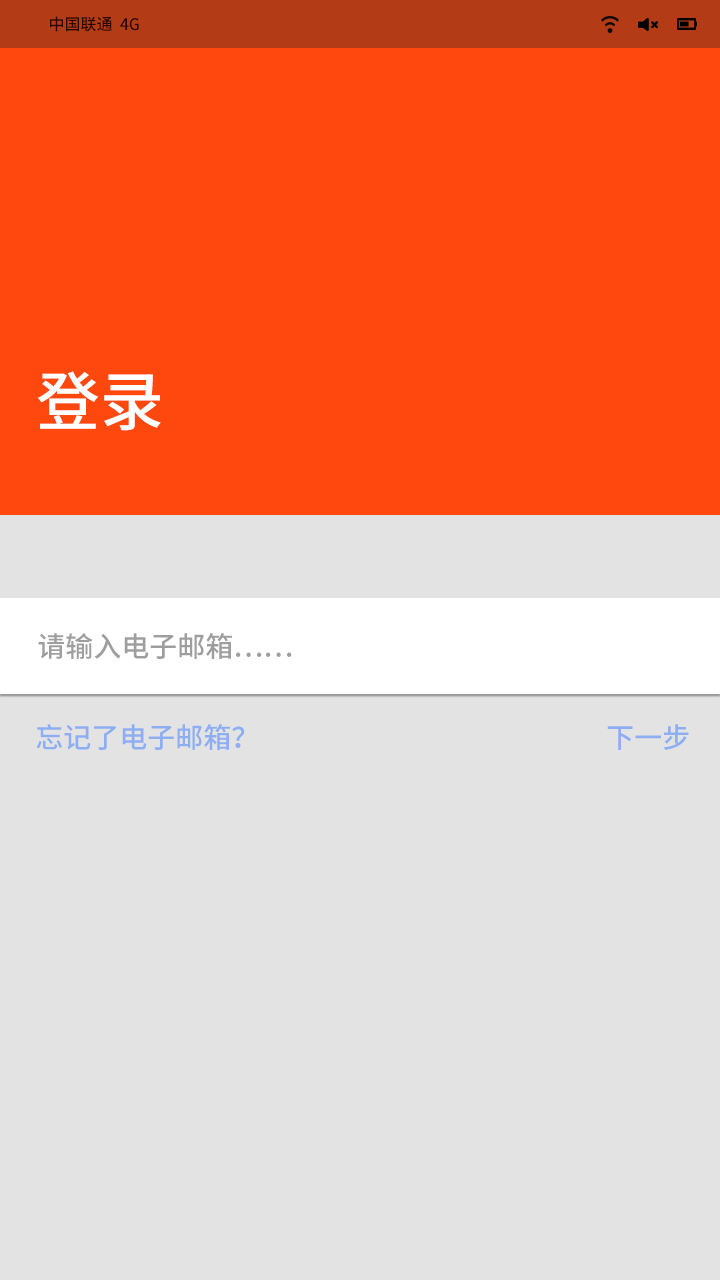
<style>
.page{position:relative;width:720px;height:1280px;background:#e4e3e3}
.page>*{position:absolute;margin:0}
.t1{font:16px "SourceHanSansCN-Medium";color:#2a0802}
.t2{font:64px "SourceHanSansCN-Medium";color:#ffffff}
.t3{font:28px "SourceHanSansCN-Medium";color:#9e9e9e}
.t4{font:28px "SourceHanSansCN-Medium";color:#8daef2}
</style>
<div class="page">
<p class="t1" style="left:50px;top:16px;width:89px;height:16px">中国联通  4G</p>
<p class="t2" style="left:37px;top:371px;width:124px;height:60px">登录</p>
<p class="t3" style="left:38px;top:633px;width:254px;height:26px">请输入电子邮箱……</p>
<p class="t4" style="left:36px;top:724px;width:209px;height:26px">忘记了电子邮箱？</p>
<p class="t4" style="left:607px;top:724px;width:82px;height:26px">下一步</p>
</div>
